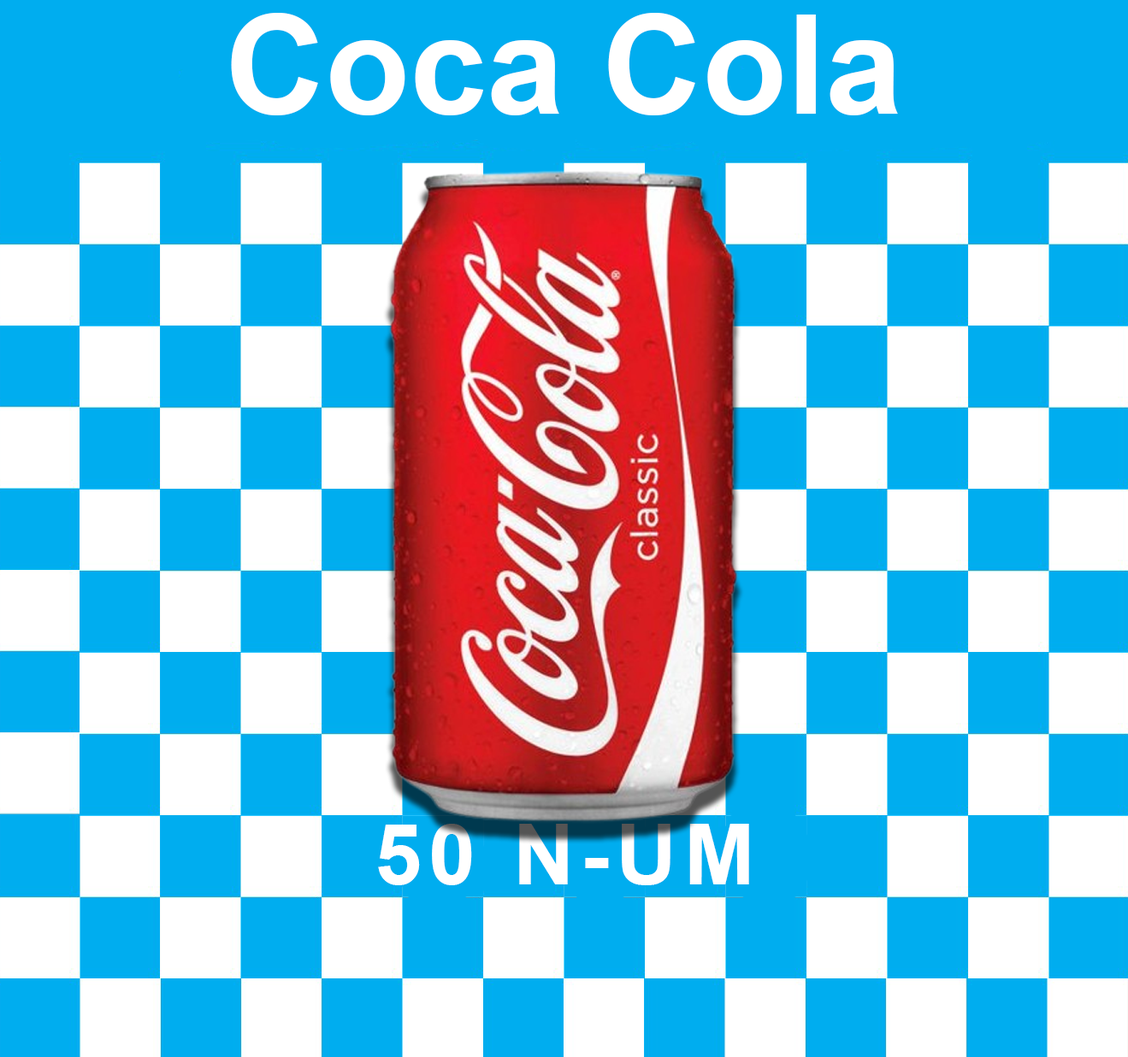
<style>
.page{position:relative;width:1128px;height:1057px;background:#00adef}
.page>*{position:absolute;margin:0}
.t1{font:138.5px "Arial-BoldMT";color:#ffffff}
.t2{font:84.6px "Arial-BoldMT";letter-spacing:0.08em;color:#ffffff}
</style>
<div class="page">
<p class="t1" style="left:231px;top:13px;width:667px;height:102px">Coca Cola</p>
<p class="t2" style="left:378px;top:824px;width:371px;height:62px">50 N-UM</p>
</div>
